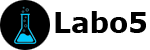
<style>
.page{position:relative;width:150px;height:50px;background:#ffffff}
.page>*{position:absolute;margin:0}
.t1{font:27.8px "Verdana-Bold";color:#000000}
</style>
<div class="page">
<p class="t1" style="left:55px;top:11px;width:91px;height:22px">Labo5</p>
</div>
